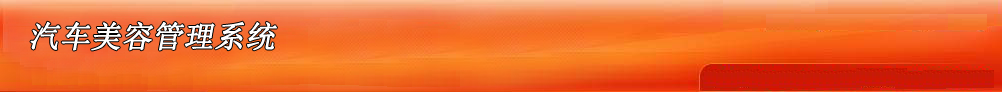
<style>
.page{position:relative;width:1002px;height:92px}
.page>*{position:absolute;margin:0}
.t1{font:30px "NSimSun";color:#fefefe;font-weight:bold;font-style:italic}
</style>
<div class="page">
<p class="t1" style="left:30px;top:21px;width:247px;height:30px">汽车美容管理系统</p>
</div>
